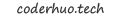
<style>
.page{position:relative;width:121px;height:20px;background:#ffffff}
.page>*{position:absolute;margin:0}
.t1{font:12.5px "SegoePrint";color:#2e2c2c}
</style>
<div class="page">
<p class="t1" style="left:17px;top:2px;width:87px;height:12px">coderhuo.tech</p>
</div>
